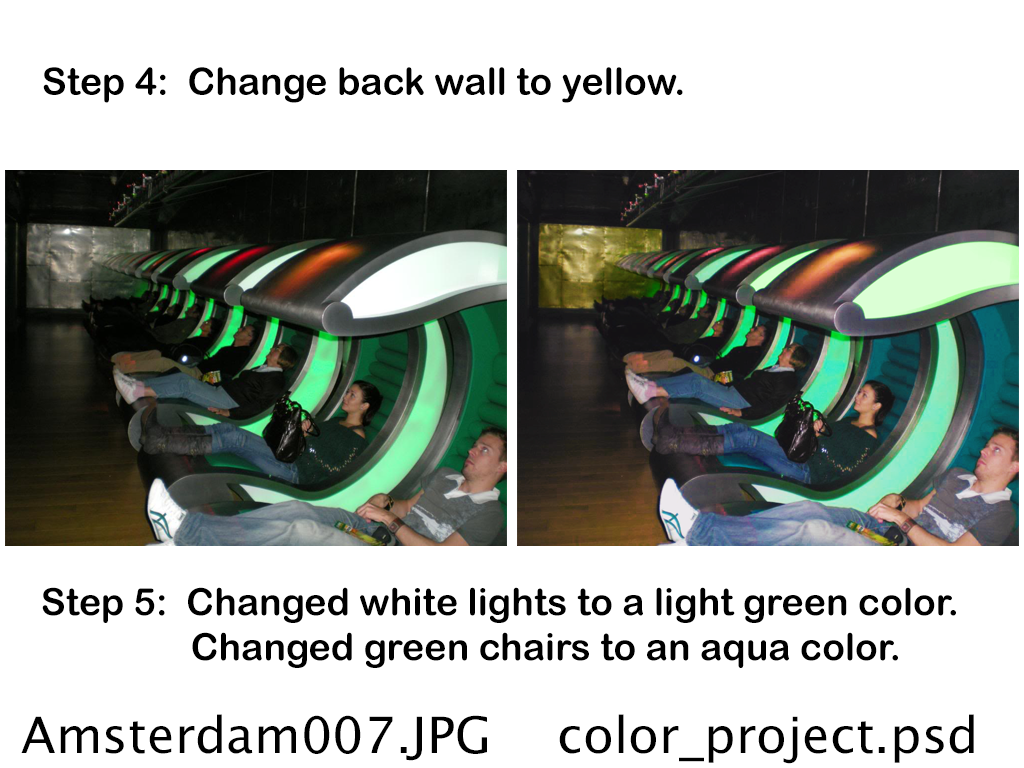
<style>
.page{position:relative;width:1024px;height:768px;background:#ffffff}
.page>*{position:absolute;margin:0}
.t1{font:37.5px "ArialRoundedMTBold";color:#000000}
</style>
<div class="page">
<p class="t1" style="left:43px;top:67px;width:640px;height:36px">Step 4:  Change back wall to yellow.</p>
<p class="t1" style="left:42px;top:587px;width:914px;height:81px">Step 5:  Changed white lights to a light green color.<br>                Changed green chairs to an aqua color.</p>
</div>
